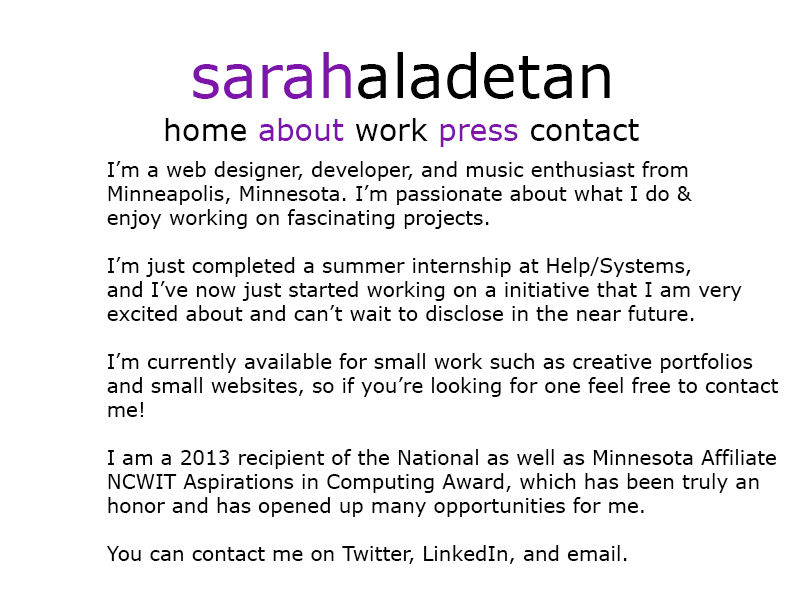
<style>
.page{position:relative;width:800px;height:600px;background:#ffffff}
.page>*{position:absolute;margin:0}
.t1{font:60px "Verdana";color:#000000}
.t2{font:60px "Verdana";color:#7e15aa}
.t3{font:30px "Verdana";color:#000000}
.t4{font:30px "Verdana";color:#7e15aa}
.t5{font:20px "Verdana";color:#000000}
</style>
<div class="page">
<p class="t1" style="left:193px;top:52px;width:417px;height:47px"><span class="t2">sarah</span>aladetan</p>
<p class="t3" style="left:165px;top:118px;width:474px;height:29px">home <span class="t4">about </span>work <span class="t4">press </span>contact</p>
<p class="t5" style="left:107px;top:161px;width:672px;height:403px">I’m a web designer, developer, and music enthusiast from<br>Minneapolis, Minnesota. I’m passionate about what I do &amp;<br>enjoy working on fascinating projects.<br><br>I’m just completed a summer internship at Help/Systems,<br>and I’ve now just started working on a initiative that I am very<br>excited about and can’t wait to disclose in the near future.<br><br>I’m currently available for small work such as creative portfolios <br>and small websites, so if you’re looking for one feel free to contact <br>me!<br><br>I am a 2013 recipient of the National as well as Minnesota Affiliate<br>NCWIT Aspirations in Computing Award, which has been truly an <br>honor and has opened up many opportunities for me.<br><br>You can contact me on Twitter, LinkedIn, and email.</p>
</div>
